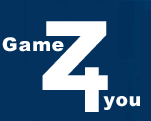
<style>
.page{position:relative;width:151px;height:121px;background:#03325e}
.page>*{position:absolute;margin:0}
.t1{font:96px "Arial-Black";letter-spacing:0.05em;color:#ffffff}
.t2{font:18.7px "Arial-Black";letter-spacing:0.05em;color:#ffffff}
</style>
<div class="page">
<p class="t1" style="left:42px;top:21px;width:66px;height:69px">Z</p>
<p class="t2" style="left:2px;top:37px;width:62px;height:15px">Game</p>
<p class="t2" style="left:103px;top:96px;width:37px;height:14px">you</p>
</div>
